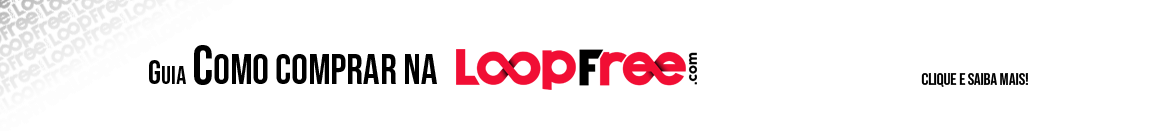
<style>
.page{position:relative;width:1161px;height:131px;background:#ffffff}
.page>*{position:absolute;margin:0}
.t1{font:41.7px "BebasNeue-Regular";color:#000000}
.t2{font:54.2px "BebasNeue-Regular";color:#000000}
.t3{font:25px "BebasNeue-Regular";color:#000000}
.t4{font:33.3px "BebasNeue-Regular";color:#000000}
.t5{font:16.7px "BebasNeue-Regular";color:#000000}
</style>
<div class="page">
<p class="t1" style="left:194px;top:45px;width:243px;height:40px"><span class="t2">C</span>omo comprar na</p>
<p class="t3" style="left:149px;top:60px;width:37px;height:24px"><span class="t4">G</span>uia</p>
<p class="t5" style="left:921px;top:73px;width:107px;height:14px">Clique e saiba mais!</p>
</div>
